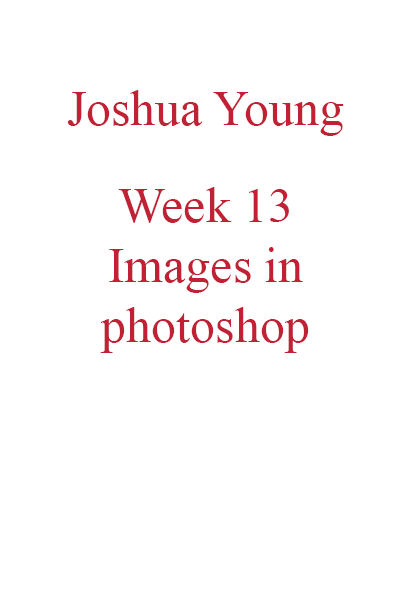
<style>
.page{position:relative;width:400px;height:600px;background:#ffffff}
.page>*{position:absolute;margin:0}
.t1{font:50px "TimesNewRomanPSMT";color:#c12035}
</style>
<div class="page">
<p class="t1" style="left:68px;top:90px;width:276px;height:46px">Joshua Young</p>
<p class="t1" style="left:100px;top:187px;width:209px;height:166px;text-align:center">Week 13<br>Images in <br>photoshop</p>
</div>
